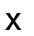
<style>
.page{position:relative;width:34px;height:36px;background:#ffffff}
.page>*{position:absolute;margin:0}
.t1{font:36px "Shruti";color:#000000}
</style>
<div class="page">
<p class="t1" style="left:5px;top:13px;width:17px;height:17px">x</p>
</div>
